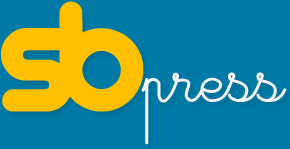
<style>
.page{position:relative;width:290px;height:149px;background:#0079a5}
.page>*{position:absolute;margin:0}
.t1{font:172px "Arista2.0";letter-spacing:-0.13em;color:#ffc000}
.t2{font:72px "Cursivestandard";color:#f5f5fa}
</style>
<div class="page">
<p class="t1" style="left:0px;top:1px;width:144px;height:111px">sb</p>
<p class="t2" style="left:141px;top:72px;width:146px;height:73px">press</p>
</div>
